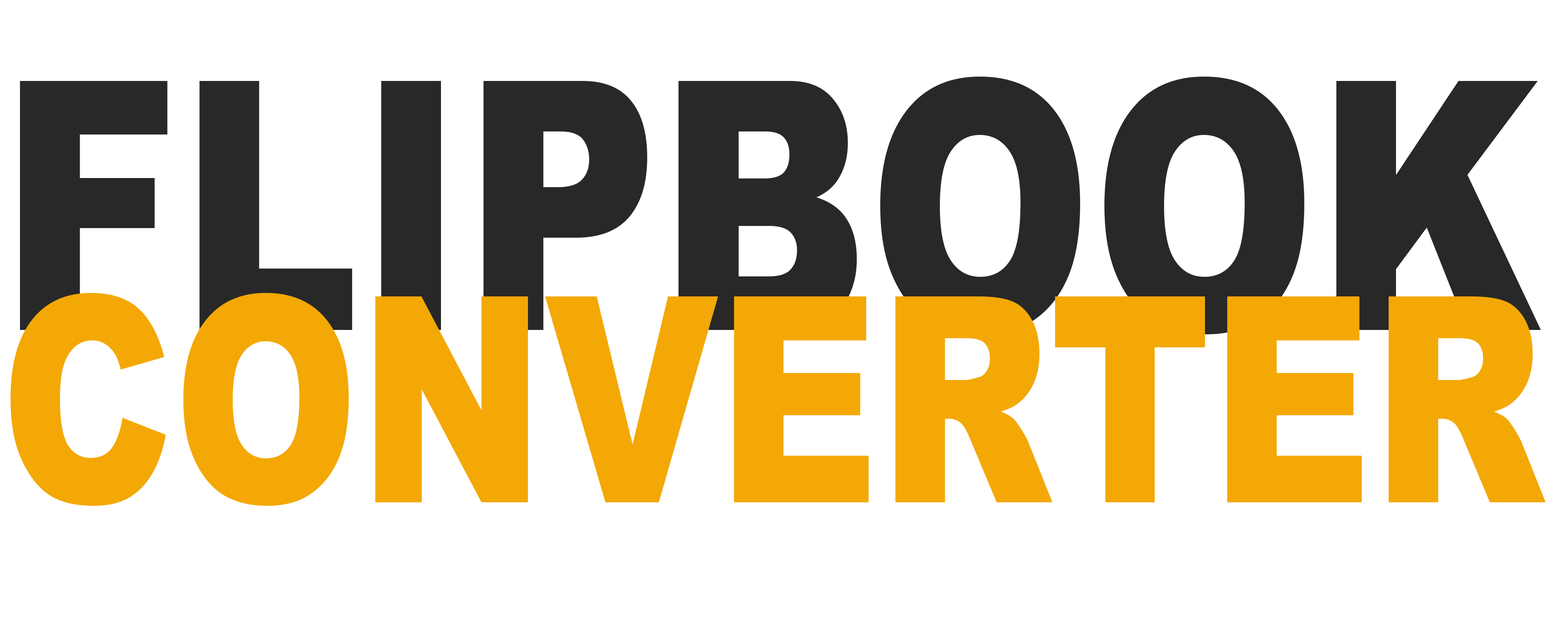
<style>
.page{position:relative;width:1568px;height:622px;background:#ffffff}
.page>*{position:absolute;margin:0}
.t1{font:287.7px/172.6px "Arial-Black";color:#f4a806;scale:0.77 1}
.t2{font:83.5px/172.6px "Arial-Black";color:#282828;scale:0.77 1}
</style>
<div class="page">
<p class="t1" style="left:10px;top:77px;width:1536px;height:429px"><span class="t2">FLIPBOOK<br></span>CONVERTER</p>
</div>
